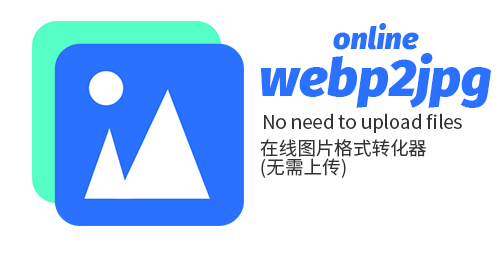
<style>
.page{position:relative;width:500px;height:258px;background:#ffffff}
.page>*{position:absolute;margin:0}
.t1{font:30.5px "FiraSans-BlackItalic";color:#2b71ff}
.t2{font:52.7px "FiraSans-BlackItalic";color:#2b71ff}
.t3{font:18.6px "NotoSansHans-Regular";color:#333333}
.t4{font:18.6px/18.6px "NotoSansHans-Regular";color:#333333}
</style>
<div class="page">
<p class="t1" style="left:333px;top:23px;width:86px;height:27px">online</p>
<p class="t2" style="left:260px;top:53px;width:232px;height:55px">webp2jpg</p>
<p class="t3" style="left:264px;top:113px;width:198px;height:20px">No need to upload files</p>
<p class="t4" style="left:260px;top:139px;width:166px;height:39px">在线图片格式转化器<br>(无需上传)</p>
</div>
